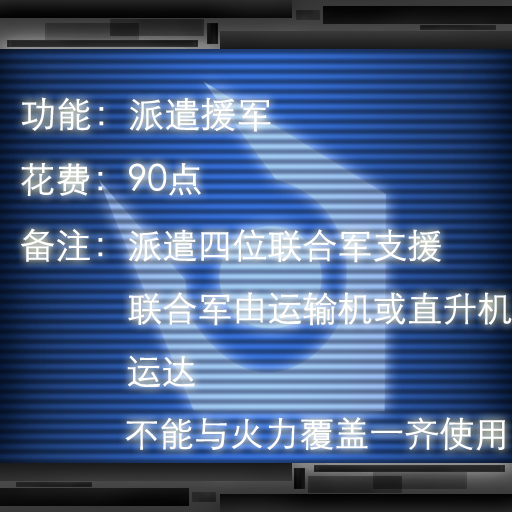
<style>
.page{position:relative;width:512px;height:512px}
.page>*{position:absolute;margin:0}
.t1{font:36px "STXihei";color:#ffffff}
.t2{font:35px "STXihei";color:#ffffff}
</style>
<div class="page">
<p class="t1" style="left:21px;top:97px;width:250px;height:35px">功能：派遣援军</p>
<p class="t1" style="left:21px;top:163px;width:180px;height:33px">花费：90点</p>
<p class="t2" style="left:20px;top:228px;width:492px;height:223px"><span class="t1">备注：</span>派遣四位联合军支援<br>            联合军由运输机或直升机<br>            运达<br>            不能与火力覆盖一齐使用</p>
</div>
